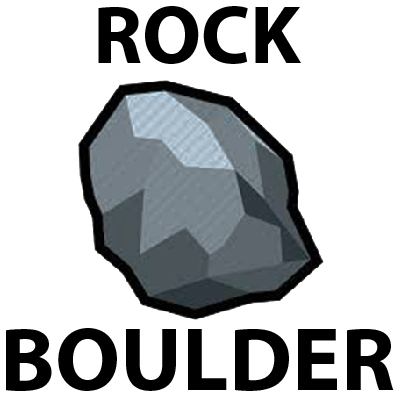
<style>
.page{position:relative;width:400px;height:400px;background:#ffffff}
.page>*{position:absolute;margin:0}
.t1{font:82.4px "MyriadPro-Bold";color:#000000}
.t2{font:91.1px "MyriadPro-Bold";color:#000000}
</style>
<div class="page">
<p class="t1" style="left:98px;top:6px;width:203px;height:58px">ROCK</p>
<p class="t2" style="left:6px;top:328px;width:388px;height:63px">BOULDER</p>
</div>
